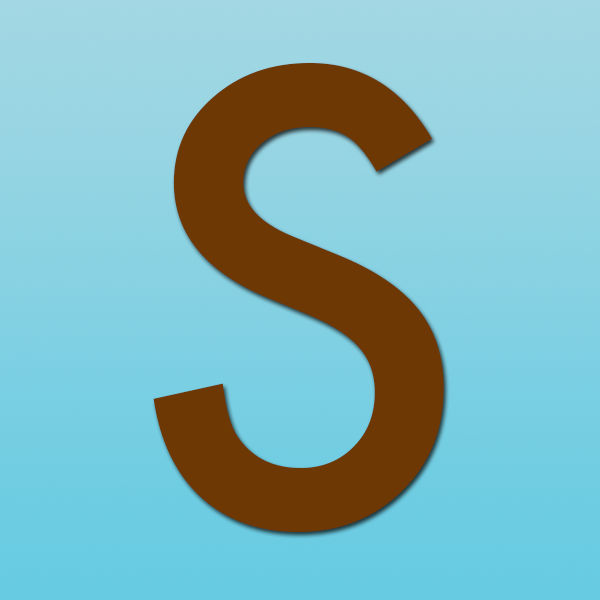
<style>
.page{position:relative;width:600px;height:600px}
.page>*{position:absolute;margin:0}
.t1{font:600px "Futura-Medium";color:#6d3803}
</style>
<div class="page">
<p class="t1" style="left:153px;top:63px;width:291px;height:469px">S</p>
</div>
